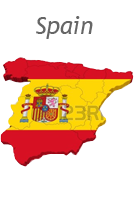
<style>
.page{position:relative;width:136px;height:200px;background:#ffffff}
.page>*{position:absolute;margin:0}
.t1{font:24px "TrebuchetMS-Italic";color:#666666}
</style>
<div class="page">
<p class="t1" style="left:36px;top:16px;width:57px;height:23px">Spain</p>
</div>
